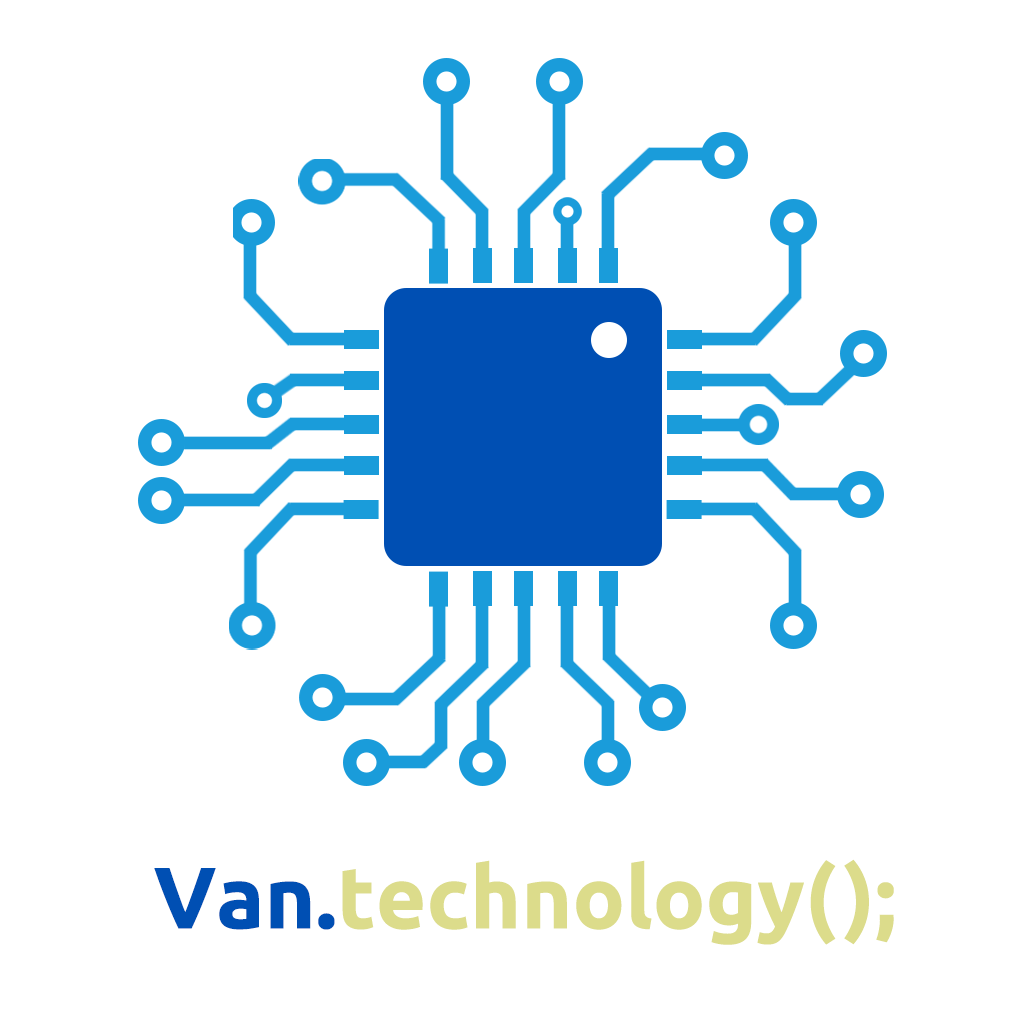
<style>
.page{position:relative;width:1024px;height:1024px;background:#ffffff}
.page>*{position:absolute;margin:0}
.t1{font:87px "Ubuntu-Bold";color:#dcdc8b}
.t2{font:87px "Ubuntu-Bold";color:#004fb3}
</style>
<div class="page">
<p class="t1" style="left:154px;top:860px;width:682px;height:85px"><span class="t2">Van.</span>technology(</p>
<p class="t1" style="left:844px;top:859px;width:50px;height:86px">);</p>
</div>
